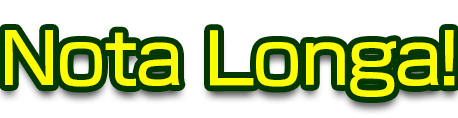
<style>
.page{position:relative;width:458px;height:118px;background:#ffffff}
.page>*{position:absolute;margin:0}
.t1{font:69.3px "NewRodinPro-DB";letter-spacing:-0.022em;color:#feff00}
</style>
<div class="page">
<p class="t1" style="left:5px;top:30px;width:450px;height:67px">Nota Longa!</p>
</div>
